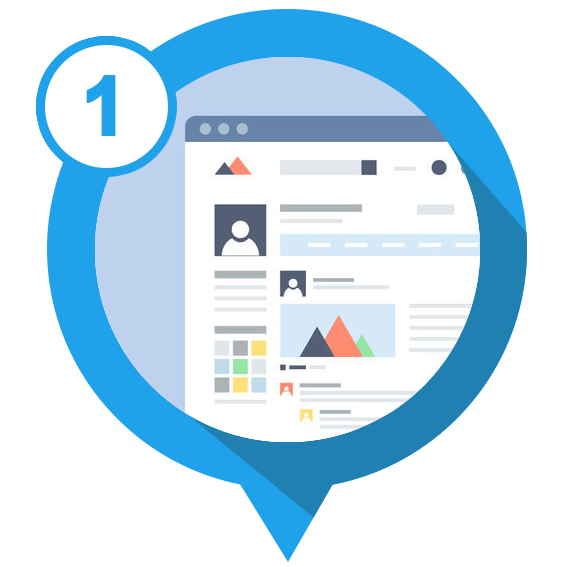
<style>
.page{position:relative;width:567px;height:567px;background:#ffffff}
.page>*{position:absolute;margin:0}
.t1{font:84px "Arial-BoldMT";color:#20a2ea;font-weight:bold}
</style>
<div class="page">
<p class="t1" style="left:86px;top:75px;width:30px;height:61px">1</p>
</div>
